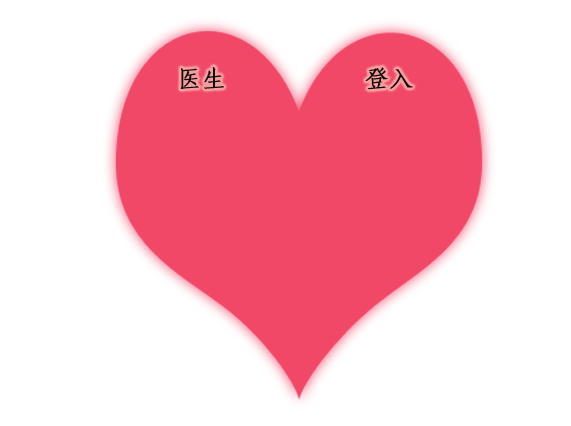
<style>
.page{position:relative;width:571px;height:426px;background:#ffffff}
.page>*{position:absolute;margin:0}
.t1{font:24px "FangSong_GB2312";color:#080805;font-weight:bold}
</style>
<div class="page">
<p class="t1" style="left:180px;top:67px;width:233px;height:23px">医生           登入</p>
</div>
